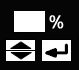
<style>
.page{position:relative;width:79px;height:70px;background:#050505}
.page>*{position:absolute;margin:0}
.t1{font:17.1px "ArialMT";color:#ffffff;font-weight:bold}
</style>
<div class="page">
<p class="t1" style="left:49px;top:15px;width:15px;height:14px">%</p>
</div>
